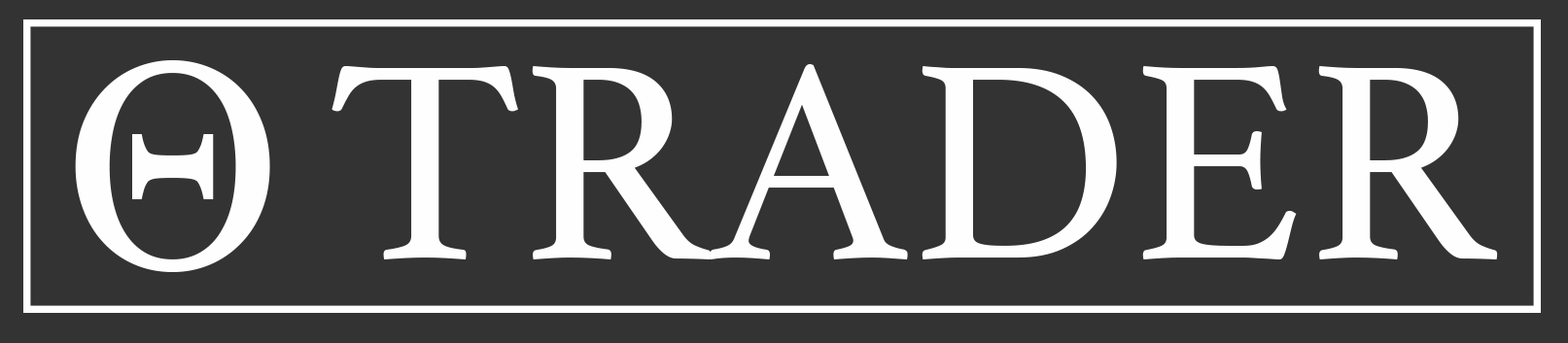
<style>
.page{position:relative;width:1568px;height:343px;background:#333333}
.page>*{position:absolute;margin:0}
.t1{font:291.6px "Georgia";color:#fffefe}
.t2{font:291.6px "Athelas-Regular";color:#fffefe}
</style>
<div class="page">
<p class="t1" style="left:75px;top:60px;width:195px;height:212px">Θ</p>
<p class="t2" style="left:331px;top:64px;width:1167px;height:196px">TRADER</p>
</div>
